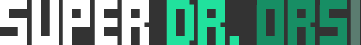
<style>
.page{position:relative;width:361px;height:45px;background:#333333}
.page>*{position:absolute;margin:0}
.t1{font:36px "FFFForward";color:#ffffff}
.t2{font:36px "FFFForward";color:#21e19d}
.t3{font:36px "FFFForward";color:#178e64}
.t4{font:36px "FFFForward";color:#5b7c70}
</style>
<div class="page">
<p class="t1" style="left:0px;top:0px;width:360px;height:45px">SUPER <span class="t2">DR. </span><span class="t3">ORS</span><span class="t4">I</span></p>
</div>
